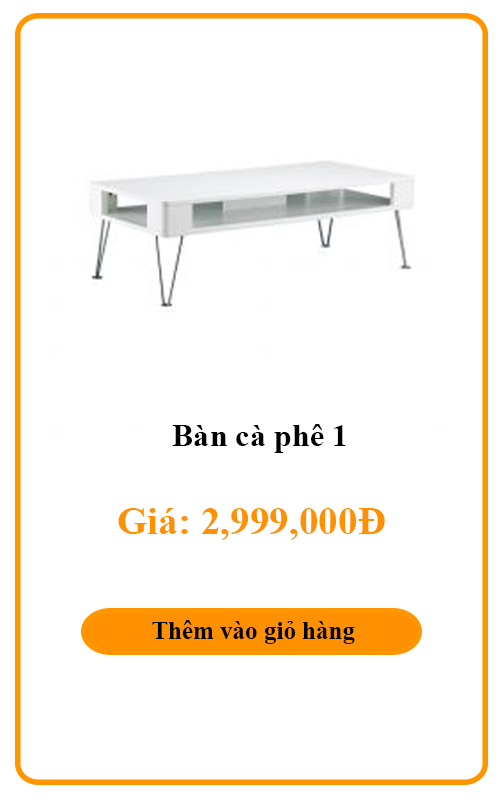
<style>
.page{position:relative;width:500px;height:800px;background:#ffffff}
.page>*{position:absolute;margin:0}
.t1{font:31.9px "TimesNewRomanPS-BoldMT";color:#000000}
.t2{font:38.8px "TimesNewRomanPS-BoldMT";color:#ff9000}
</style>
<div class="page">
<p class="t1" style="left:172px;top:424px;width:174px;height:29px">Bàn cà phê 1</p>
<p class="t2" style="left:118px;top:508px;width:267px;height:32px">Giá: 2,999,000Đ</p>
</div>
